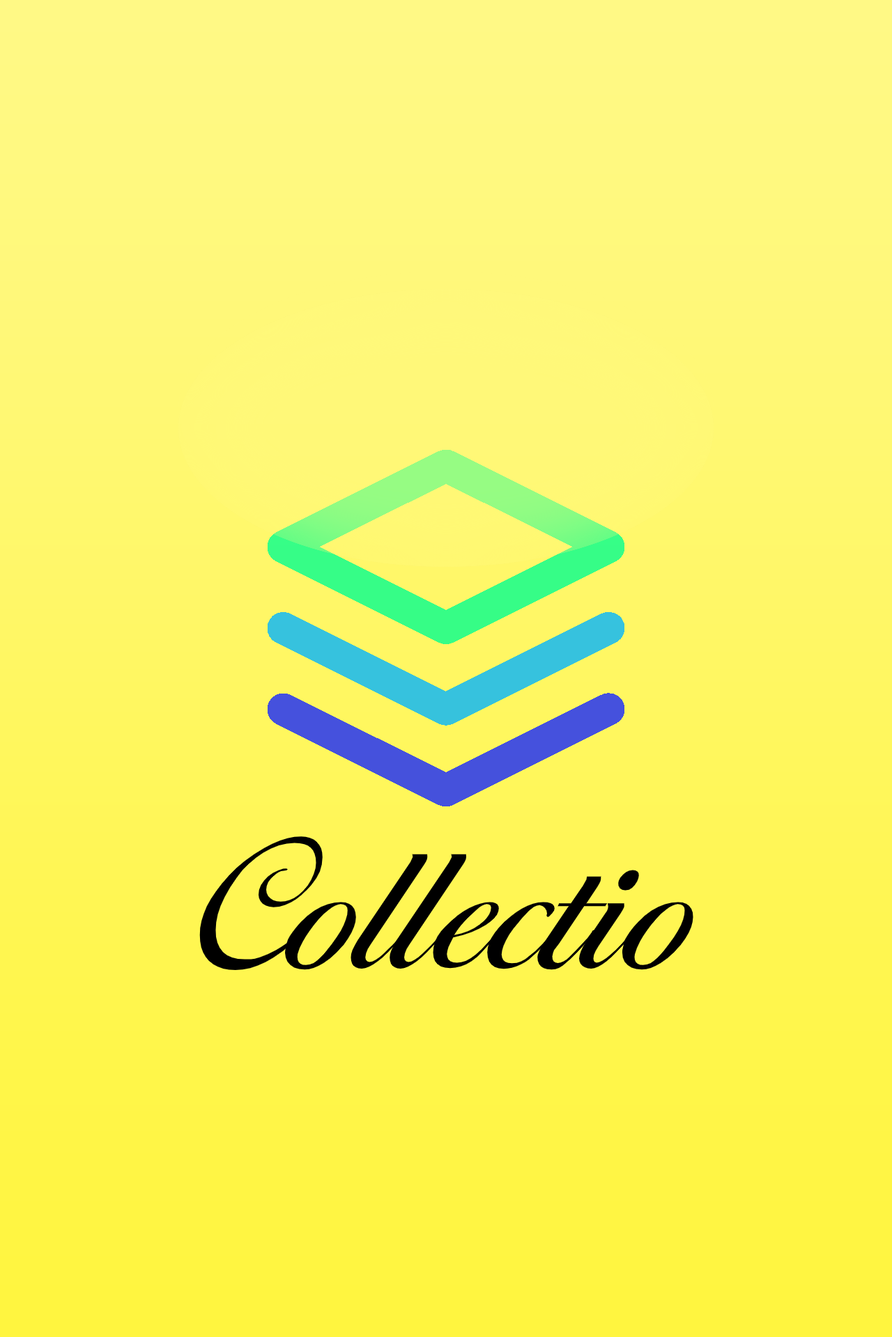
<style>
.page{position:relative;width:892px;height:1337px}
.page>*{position:absolute;margin:0}
.t1{font:250.8px "Ballantines-Regular";color:#000000}
</style>
<div class="page">
<p class="t1" style="left:199px;top:837px;width:494px;height:134px">Collectio</p>
</div>
